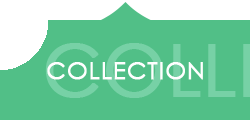
<style>
.page{position:relative;width:250px;height:120px;background:#51bf87}
.page>*{position:absolute;margin:0}
.t1{font:24px "CenturyGothic";color:#ffffff;font-weight:bold}
</style>
<div class="page">
<p class="t1" style="left:47px;top:62px;width:156px;height:18px">COLLECTION</p>
</div>
